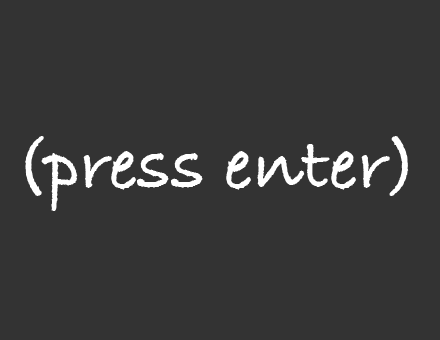
<style>
.page{position:relative;width:440px;height:340px;background:#333333}
.page>*{position:absolute;margin:0}
.t1{font:75px "BradleyHandITCTTBold";color:#ffffff}
</style>
<div class="page">
<p class="t1" style="left:25px;top:136px;width:384px;height:75px">(press enter)</p>
</div>
